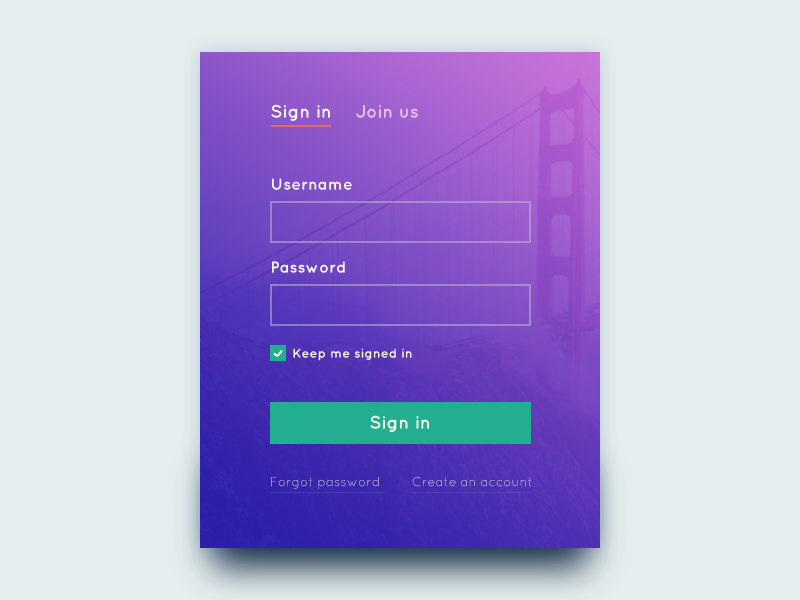
<style>
.page{position:relative;width:800px;height:600px;background:#e5eeee}
.page>*{position:absolute;margin:0}
.t1{font:18px "Quicksand-Bold";color:#fbf6e4}
.t2{font:18px "Quicksand-Bold";color:#e1c2f1}
.t3{font:16px "Quicksand-Bold";color:#fbf6e4}
.t4{font:13px "Quicksand-Bold";color:#fbf6e4}
.t5{font:13px "Quicksand-Regular"}
.t6{font:13px "Quicksand-Regular";color:#b9b9cc}
</style>
<div class="page">
<p class="t1" style="left:271px;top:104px;width:59px;height:17px">Sign in</p>
<p class="t2" style="left:356px;top:105px;width:62px;height:13px">Join us</p>
<p class="t3" style="left:272px;top:178px;width:80px;height:12px">Username</p>
<p class="t3" style="left:272px;top:261px;width:73px;height:12px">Password</p>
<p class="t4" style="left:293px;top:348px;width:119px;height:13px">Keep me signed in</p>
<p class="t1" style="left:370px;top:415px;width:59px;height:17px">Sign in</p>
<p class="t5" style="left:271px;top:477px;width:108px;height:12px">Forgot password</p>
<p class="t6" style="left:412px;top:477px;width:119px;height:10px">Create an account</p>
</div>
